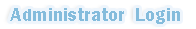
<style>
.page{position:relative;width:196px;height:29px;background:#ffffff}
.page>*{position:absolute;margin:0}
.t1{font:19px "FranklinGothic-Demi";color:#85bcdc}
</style>
<div class="page">
<p class="t1" style="left:10px;top:8px;width:170px;height:16px">Administrator  Login</p>
</div>
